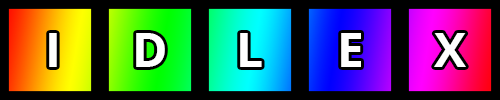
<style>
.page{position:relative;width:500px;height:100px;background:#000000}
.page>*{position:absolute;margin:0}
.t1{font:48px "OpenSans-Bold";color:#fefefe}
</style>
<div class="page">
<p class="t1" style="left:49px;top:33px;width:8px;height:34px">I</p>
<p class="t1" style="left:136px;top:33px;width:29px;height:34px">D</p>
<p class="t1" style="left:240px;top:33px;width:22px;height:34px">L</p>
<p class="t1" style="left:341px;top:33px;width:20px;height:34px">E</p>
<p class="t1" style="left:434px;top:33px;width:32px;height:34px">X</p>
</div>
